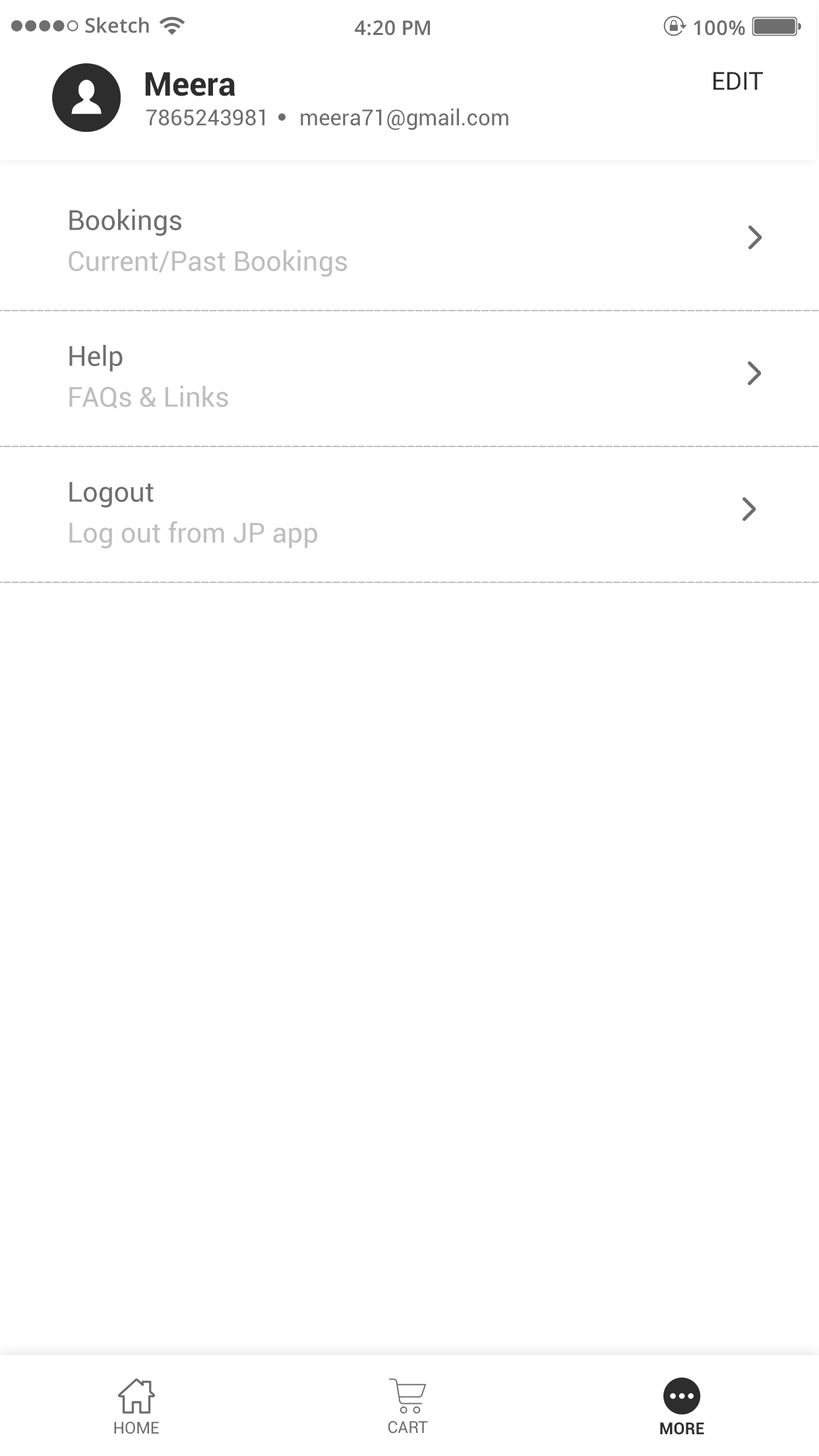
<style>
.page{position:relative;width:819px;height:1456px;background:#ffffff}
.page>*{position:absolute;margin:0}
.t1{font:20.1px "OpenSans-Semibold";color:#6e6e6e}
.t2{font:33px "Roboto-Bold";color:#2d2d2d}
.t3{font:33px "Roboto-Bold";color:#2d2d2d;text-transform:uppercase}
.t4{font:24.7px "Roboto-Regular";color:#2d2d2d}
.t5{font:22px "Roboto-Regular";color:#6e6e6e;text-transform:uppercase}
.t6{font:22px "Roboto-Regular";color:#6e6e6e}
.t7{font:27.5px "Roboto-Regular";color:#6e6e6e}
.t8{font:27.5px "Roboto-Regular";color:#bebebe}
.t9{font:16.5px "Roboto-Regular";color:#6e6e6e;text-transform:uppercase}
.t10{font:16.5px "Roboto-Bold";color:#2d2d2d;text-transform:uppercase}
</style>
<div class="page">
<p class="t1" style="left:85px;top:17px;width:64px;height:16px">Sketch</p>
<p class="t1" style="left:355px;top:20px;width:75px;height:16px">4:20 PM</p>
<p class="t1" style="left:694px;top:20px;width:51px;height:16px">100%</p>
<p class="t2" style="left:145px;top:72px;width:90px;height:24px"><span class="t3">M</span>eera</p>
<p class="t4" style="left:713px;top:72px;width:50px;height:18px">EDIT</p>
<p class="t5" style="left:146px;top:109px;width:118px;height:17px">7865243981</p>
<p class="t6" style="left:301px;top:108px;width:207px;height:22px">meera71@gmail.com</p>
<p class="t7" style="left:69px;top:209px;width:112px;height:27px">Bookings</p>
<p class="t8" style="left:69px;top:250px;width:278px;height:27px">Current/Past Bookings</p>
<p class="t7" style="left:69px;top:345px;width:54px;height:27px">Help</p>
<p class="t8" style="left:69px;top:386px;width:159px;height:23px">FAQs &amp; Links</p>
<p class="t7" style="left:69px;top:482px;width:85px;height:26px">Logout</p>
<p class="t8" style="left:69px;top:521px;width:248px;height:28px">Log out from JP app</p>
<p class="t9" style="left:114px;top:1422px;width:45px;height:12px">Home</p>
<p class="t9" style="left:388px;top:1421px;width:40px;height:13px">Cart</p>
<p class="t10" style="left:660px;top:1422px;width:44px;height:13px">More</p>
</div>
